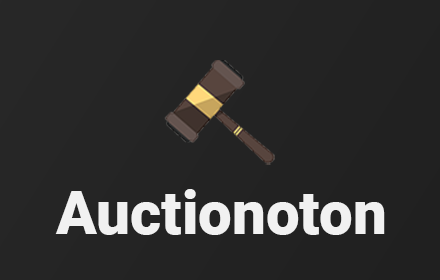
<style>
.page{position:relative;width:440px;height:280px}
.page>*{position:absolute;margin:0}
.t1{font:60px "Roboto-Black";color:#f2f2f2}
</style>
<div class="page">
<p class="t1" style="left:55px;top:189px;width:330px;height:46px">Auctionoton</p>
</div>
